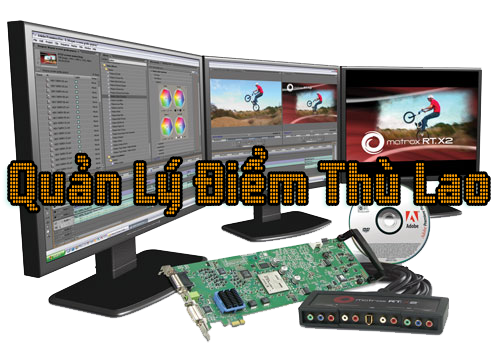
<style>
.page{position:relative;width:500px;height:359px;background:#ffffff}
.page>*{position:absolute;margin:0}
.t1{font:60px "HP-Yard-Regular";color:#ff9e00;scale:0.75 1}
</style>
<div class="page">
<p class="t1" style="left:10px;top:148px;width:478px;height:67px">Quaûn Lyù Ñieåm Thuø Lao</p>
</div>
